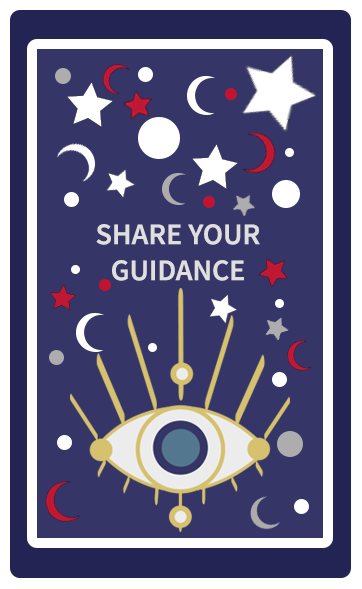
<style>
.page{position:relative;width:362px;height:589px;background:#353567}
.page>*{position:absolute;margin:0}
.t1{font:30px "SourceSansPro-Semibold";color:#dfdfdf}
</style>
<div class="page">
<p class="t1" style="left:96px;top:224px;width:164px;height:57px;text-align:center">SHARE YOUR GUIDANCE</p>
</div>
